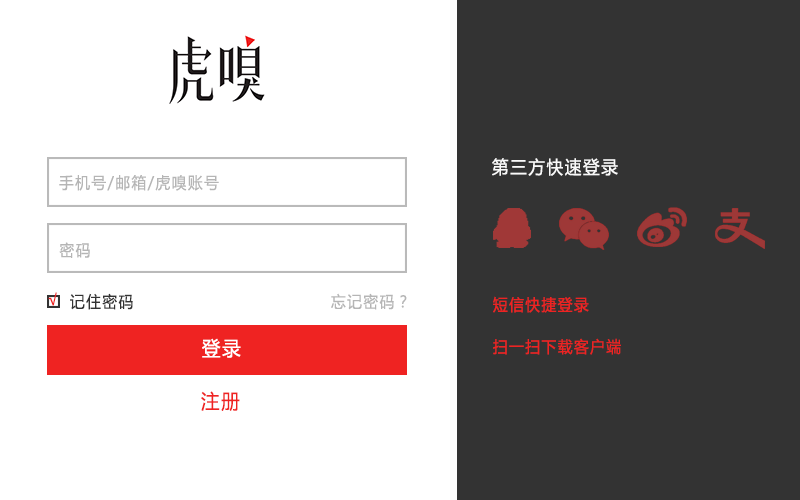
<style>
.page{position:relative;width:800px;height:500px;background:#ffffff}
.page>*{position:absolute;margin:0}
.t1{font:18px "MicrosoftYaHei";letter-spacing:0.1em;color:#fafafa;scale:0.92 1}
.t2{font:16px "MicrosoftYaHei";letter-spacing:0.1em;color:#b5b5b5;scale:0.92 1}
.t3{font:16px "MicrosoftYaHei";letter-spacing:0.1em;color:#ef2322;scale:0.92 1}
.t4{font:16px "MicrosoftYaHei";letter-spacing:0.1em;color:#333333;scale:0.92 1}
.t5{font:20px "MicrosoftYaHei";letter-spacing:0.1em;color:#ffffff;scale:0.92 1}
.t6{font:20px "MicrosoftYaHei";letter-spacing:0.1em;color:#ef2322;scale:0.92 1}
</style>
<div class="page">
<p class="t1" style="left:492px;top:158px;width:126px;height:18px">第三方快速登录</p>
<p class="t2" style="left:59px;top:175px;width:160px;height:16px">手机号/邮箱/虎嗅账号</p>
<p class="t2" style="left:59px;top:242px;width:31px;height:16px">密码</p>
<p class="t3" style="left:48px;top:292px;width:9px;height:14px">√</p>
<p class="t4" style="left:70px;top:293px;width:63px;height:17px">记住密码</p>
<p class="t2" style="left:331px;top:293px;width:76px;height:17px">忘记密码？</p>
<p class="t3" style="left:493px;top:296px;width:96px;height:17px">短信快捷登录</p>
<p class="t5" style="left:202px;top:338px;width:39px;height:20px">登录</p>
<p class="t3" style="left:493px;top:338px;width:128px;height:17px">扫一扫下载客户端</p>
<p class="t6" style="left:201px;top:391px;width:39px;height:20px">注册</p>
</div>
